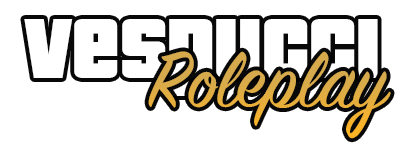
<style>
.page{position:relative;width:411px;height:152px;background:#ffffff}
.page>*{position:absolute;margin:0}
.t1{font:91.7px "PricedownBl-Regular";color:#ffffff}
.t2{font:87.5px "SignPainter-HouseScript";color:#dbac47}
</style>
<div class="page">
<p class="t1" style="left:24px;top:19px;width:354px;height:77px">Vespucci</p>
<p class="t2" style="left:148px;top:51px;width:243px;height:88px">Roleplay</p>
</div>
